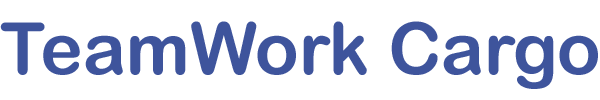
<style>
.page{position:relative;width:600px;height:100px;background:#ffffff}
.page>*{position:absolute;margin:0}
.t1{font:71.9px "ArialRoundedMTBold";color:#3e549c}
</style>
<div class="page">
<p class="t1" style="left:0px;top:21px;width:598px;height:68px">TeamWork Cargo</p>
</div>
